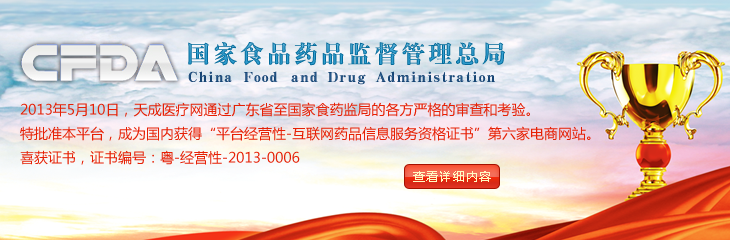
<style>
.page{position:relative;width:730px;height:240px}
.page>*{position:absolute;margin:0}
.t1{font:24.5px "HYa9gj";letter-spacing:0.075em}
.t2{font:14.7px "HYa9gj";letter-spacing:0.075em;color:#1b4a7a}
.t3{font:14px/24px "MicrosoftYaHei";color:#e62005}
.t4{font:12px "MicrosoftYaHei";letter-spacing:0.1em;color:#fffbc4}
</style>
<div class="page">
<p class="t1" style="left:188px;top:42px;width:317px;height:24px">国家食品药品监督管理总局</p>
<p class="t2" style="left:188px;top:71px;width:307px;height:14px">China Food  and Drug Administration</p>
<p class="t3" style="left:20px;top:102px;width:571px;height:63px">2013年5月10日，天成医疗网通过广东省至国家食药监局的各方严格的审查和考验。<br>特批准本平台，成为国内获得“平台经营性-互联网药品信息服务资格证书”第六家电商网站。<br>喜获证书，证书编号：粤-经营性-2013-0006</p>
<p class="t4" style="left:413px;top:171px;width:78px;height:11px">查看详细内容</p>
</div>
